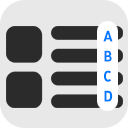
<style>
.page{position:relative;width:128px;height:128px;background:#e8e8e8}
.page>*{position:absolute;margin:0}
.t1{font:15px/20px "Morpeth-SemiBold";color:#007aff}
</style>
<div class="page">
<p class="t1" style="left:103px;top:30px;width:10px;height:72px">A<br>B<br>C<br>D</p>
</div>
